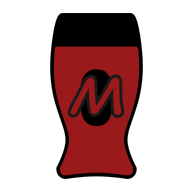
<style>
.page{position:relative;width:192px;height:192px;background:#ffffff}
.page>*{position:absolute;margin:0}
.t1{font:47.5px "ComicSansMS-Italic";letter-spacing:-0.025em;color:#9a1a1c;scale:1.35 1}
</style>
<div class="page">
<p class="t1" style="left:70px;top:77px;width:52px;height:38px">M</p>
</div>
